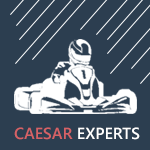
<style>
.page{position:relative;width:150px;height:150px;background:#2c3e50}
.page>*{position:absolute;margin:0}
.t1{font:16px "SegoeUI-Semibold";color:#ffffff}
.t2{font:16px "SegoeUI-Semibold";color:#d56266}
</style>
<div class="page">
<p class="t1" style="left:14px;top:127px;width:126px;height:13px"><span class="t2">CAESAR </span>EXPERTS</p>
</div>
